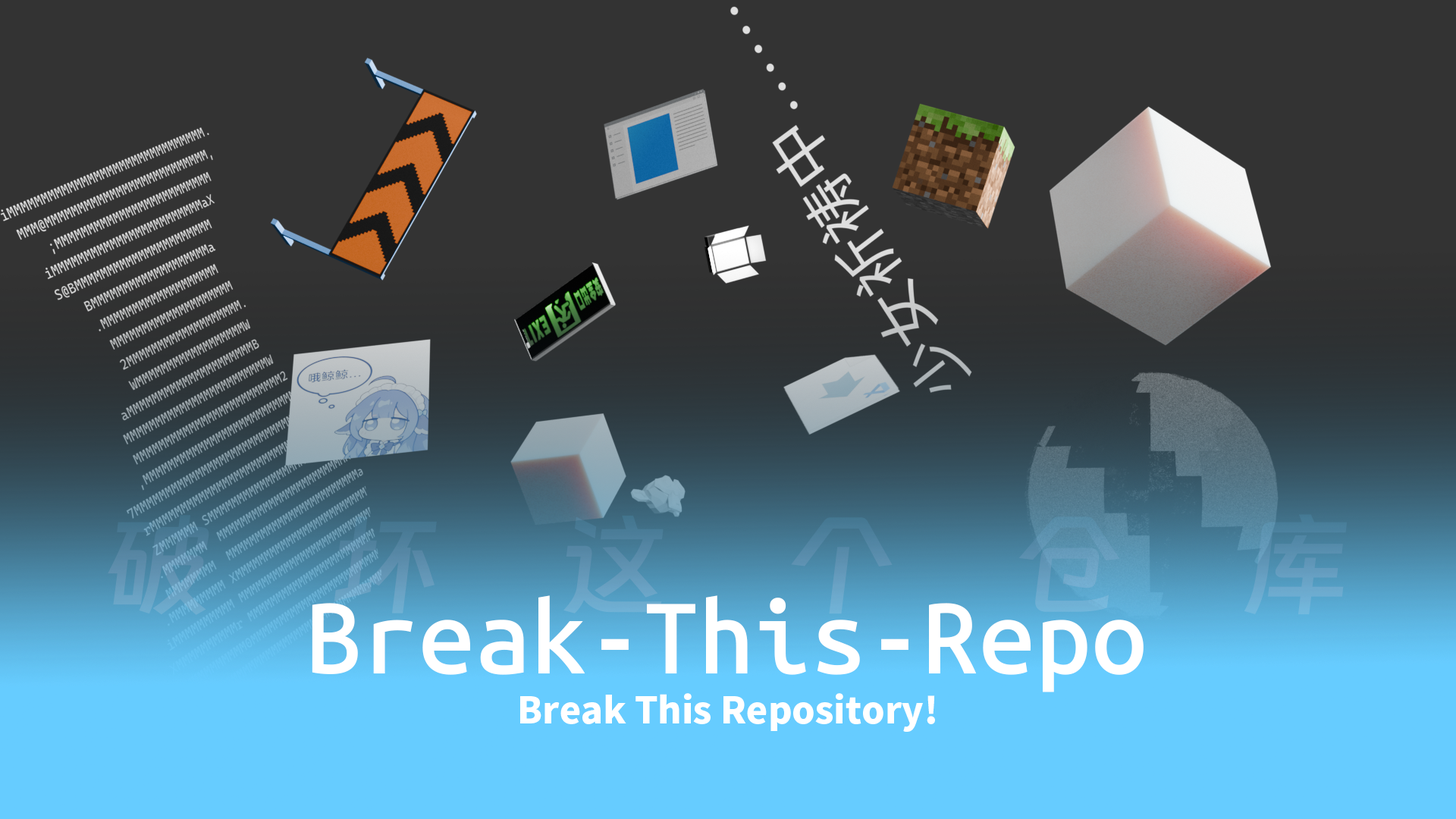
<style>
.page{position:relative;width:1456px;height:819px;background:#333333}
.page>*{position:absolute;margin:0}
.t1{font:100.1px "UbuntuMonoRoman-Medium";color:#ffffff}
.t2{font:36.4px "SourceHanSansCN-Heavy";color:#ffffff}
</style>
<div class="page">
<p class="t1" style="left:312px;top:595px;width:832px;height:97px">Break-This-Repo</p>
<p class="t2" style="left:520px;top:693px;width:415px;height:39px">Break This Repository!</p>
</div>
